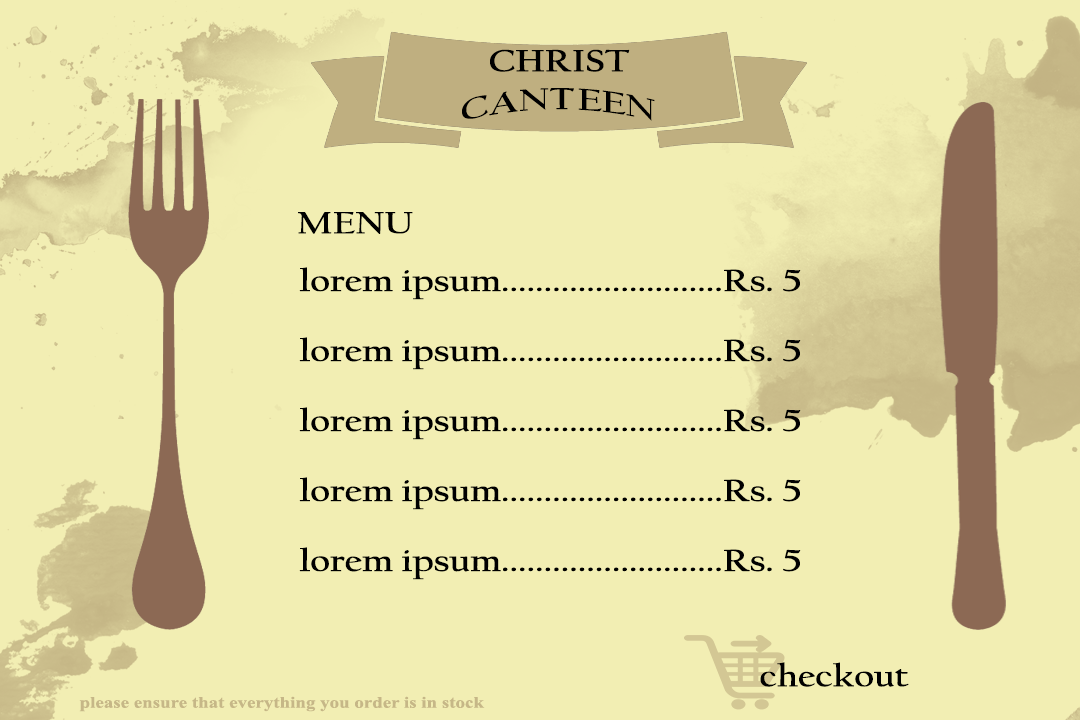
<style>
.page{position:relative;width:1080px;height:720px;background:#f2eeb3}
.page>*{position:absolute;margin:0}
.t1{font:32.1px "CalifornianFB-Bold";color:#000000;scale:1.18 1}
.t2{font:16px "TimesNewRomanPS-BoldMT";color:#c6b787;scale:1.18 1}
</style>
<div class="page">
<p class="t1" style="left:490px;top:49px;width:140px;height:23px">CHRIST</p>
<p class="t1" style="left:462px;top:88px;width:193px;height:33px">CANTEEN</p>
<p class="t1" style="left:298px;top:212px;width:115px;height:22px">MENU</p>
<p class="t1" style="left:299px;top:267px;width:502px;height:313px">lorem ipsum..........................Rs. 5<br><br>lorem ipsum..........................Rs. 5<br><br>lorem ipsum..........................Rs. 5<br><br>lorem ipsum..........................Rs. 5<br><br>lorem ipsum..........................Rs. 5</p>
<p class="t1" style="left:760px;top:662px;width:149px;height:25px">checkout</p>
<p class="t2" style="left:79px;top:696px;width:406px;height:16px">please ensure that everything you order is in stock</p>
</div>
